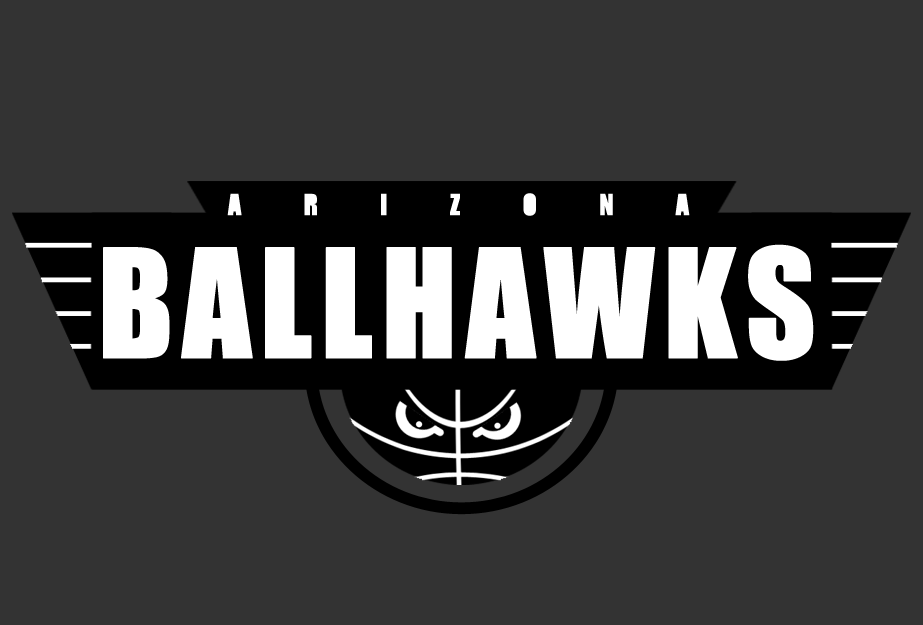
<style>
.page{position:relative;width:923px;height:625px;background:#333333}
.page>*{position:absolute;margin:0}
.t1{font:139.6px "Impact";letter-spacing:0.04em;color:#ffffff;font-weight:bold}
</style>
<div class="page">
<p class="t1" style="left:103px;top:244px;width:711px;height:117px">BALLHAWKS</p>
</div>
